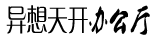
<style>
.page{position:relative;width:156px;height:43px;background:#ffffff}
.page>*{position:absolute;margin:0}
.t1{font:30px "GJJZQJW--GB1-0";color:#000000;scale:0.69 1}
.t2{font:30px "Ò¶¸ùÓÑÃ«±ÊÐÐÊé";color:#000000;scale:0.69 1}
.t3{font:30px "GJJZQJW--GB1-0";color:#ffffff;scale:0.69 1}
</style>
<div class="page">
<p class="t1" style="left:6px;top:5px;width:144px;height:30px">异想天开<span class="t2">办公厅</span><span class="t3">开</span></p>
</div>
